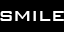
<style>
.page{position:relative;width:64px;height:32px;background:#000000}
.page>*{position:absolute;margin:0}
.t1{font:24px "BankGothicBT-Light";color:#ffffff}
</style>
<div class="page">
<p class="t1" style="left:0px;top:11px;width:64px;height:10px">smile</p>
</div>
